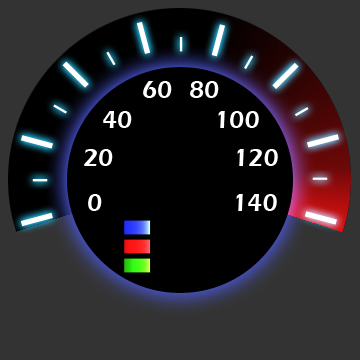
<style>
.page{position:relative;width:360px;height:360px;background:#333333}
.page>*{position:absolute;margin:0}
.t1{font:25px "ErasITC-Demi";color:#ffffff}
</style>
<div class="page">
<p class="t1" style="left:143px;top:81px;width:29px;height:17px">60</p>
<p class="t1" style="left:190px;top:81px;width:29px;height:17px">80</p>
<p class="t1" style="left:103px;top:111px;width:29px;height:17px">40</p>
<p class="t1" style="left:218px;top:111px;width:41px;height:17px">100</p>
<p class="t1" style="left:84px;top:149px;width:29px;height:17px">20</p>
<p class="t1" style="left:237px;top:149px;width:41px;height:17px">120</p>
<p class="t1" style="left:88px;top:194px;width:14px;height:17px">0</p>
<p class="t1" style="left:236px;top:194px;width:41px;height:17px">140</p>
</div>
